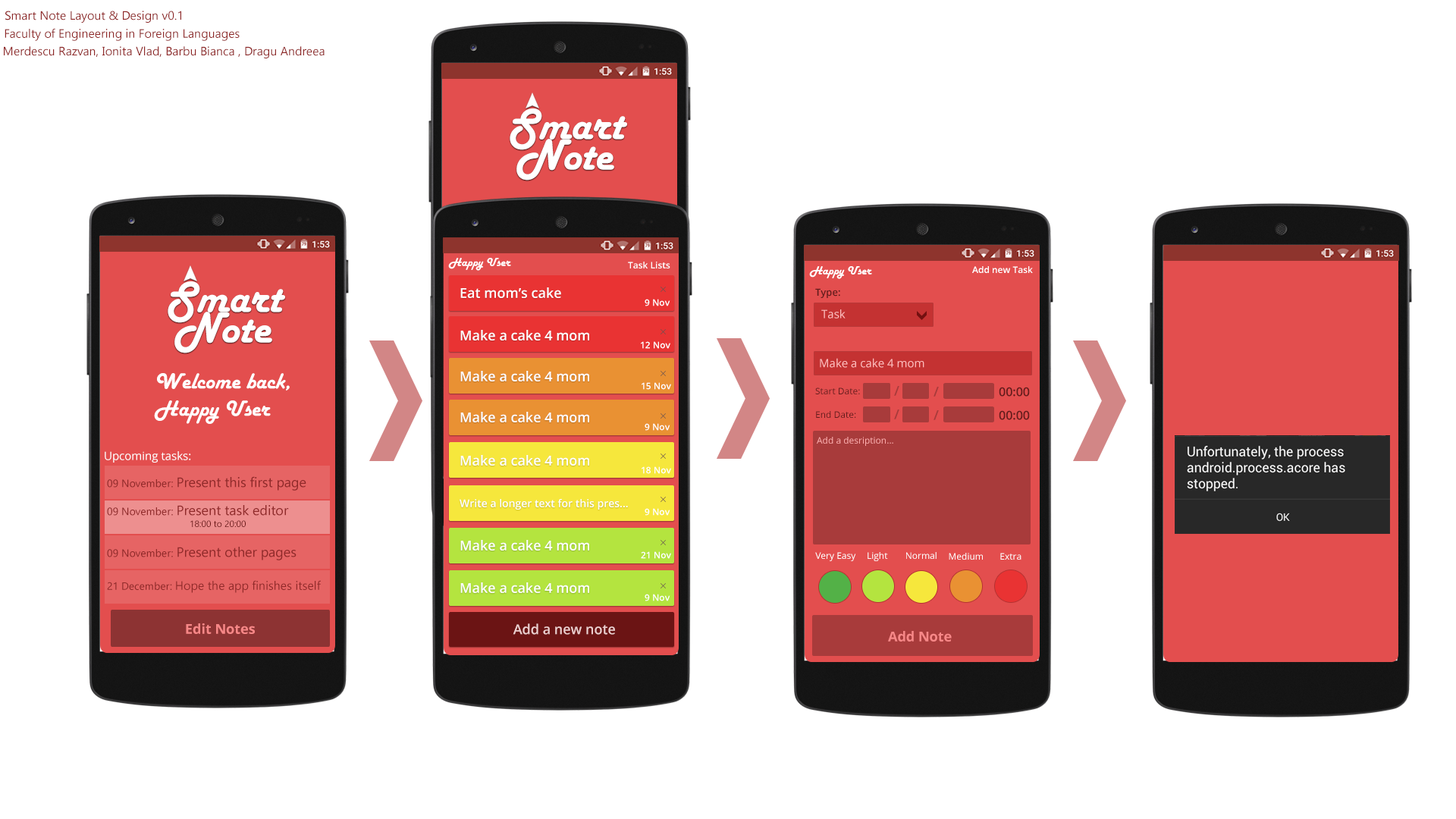
<style>
.page{position:relative;width:1456px;height:819px;background:#ffffff}
.page>*{position:absolute;margin:0}
.t1{font:12.1px "KhmerUI";color:#902929}
.t2{font:45.5px "HarlowSolid";color:#ffffff}
.t3{font:12.1px "HarlowSolid";color:#ffffff}
.t4{font:9.1px "OpenSans-Semibold";color:#ffffff}
.t5{font:13.6px "OpenSans-Semibold";color:#ffffff}
.t6{font:9.9px "OpenSans-Semibold";color:#631c1c}
.t7{font:11.4px "OpenSans";color:#ffbcbc}
.t8{font:11.4px "OpenSans";color:#ffbbbb}
.t9{font:22.7px "HarlowSolid";color:#ffffff}
.t10{font:9.1px "OpenSans";color:#631c1c}
.t11{font:13.6px "OpenSans-Semibold";color:#a83b3b}
.t12{font:12.1px "OpenSans-Semibold";color:#631c1c}
.t13{font:9.1px "OpenSans";color:#fdabab}
.t14{font:11.4px "OpenSans";color:#ffffff}
.t15{font:13.6px "KhmerUI";color:#902929}
.t16{font:10.6px "KhmerUI";color:#902929}
.t17{font:10.6px "OpenSans-Semibold";color:#ffffff}
.t18{font:9.1px "KhmerUI";color:#6d1616}
.t19{font:9.1px "OpenSans";color:#ffffff}
.t20{font:13.6px "OpenSans-Bold";color:#f78787}
.t21{font:13.6px "OpenSans-Semibold";color:#edcfcf}
</style>
<div class="page">
<p class="t1" style="left:5px;top:11px;width:176px;height:12px">Smart Note Layout &amp; Design v0.1</p>
<p class="t1" style="left:5px;top:28px;width:235px;height:13px">Faculty of Engineering in Foreign Languages</p>
<p class="t1" style="left:4px;top:46px;width:321px;height:12px">Merdescu Razvan, Ionita Vlad, Barbu Bianca , Dragu Andreea</p>
<p class="t2" style="left:510px;top:108px;width:117px;height:42px">Smart</p>
<p class="t2" style="left:516px;top:139px;width:98px;height:41px">Note</p>
<p class="t3" style="left:448px;top:258px;width:63px;height:13px">Happy User</p>
<p class="t4" style="left:628px;top:262px;width:42px;height:6px">Task Lists</p>
<p class="t3" style="left:809px;top:266px;width:63px;height:13px">Happy User</p>
<p class="t4" style="left:972px;top:266px;width:61px;height:7px">Add new Task</p>
<p class="t2" style="left:168px;top:281px;width:117px;height:42px">Smart</p>
<p class="t5" style="left:460px;top:287px;width:101px;height:11px">Eat mom’s cake</p>
<p class="t6" style="left:815px;top:288px;width:25px;height:10px">Type:</p>
<p class="t4" style="left:645px;top:299px;width:25px;height:7px">9 Nov</p>
<p class="t2" style="left:174px;top:312px;width:98px;height:41px">Note</p>
<p class="t7" style="left:821px;top:309px;width:25px;height:9px">Task</p>
<p class="t5" style="left:460px;top:330px;width:129px;height:10px">Make a cake 4 mom</p>
<p class="t4" style="left:641px;top:341px;width:29px;height:8px">12 Nov</p>
<p class="t8" style="left:820px;top:358px;width:104px;height:10px">Make a cake 4 mom</p>
<p class="t9" style="left:154px;top:373px;width:136px;height:51px">Welcome back, <br>Happy User</p>
<p class="t5" style="left:460px;top:371px;width:129px;height:10px">Make a cake 4 mom</p>
<p class="t4" style="left:642px;top:382px;width:29px;height:8px">15 Nov</p>
<p class="t10" style="left:815px;top:388px;width:45px;height:6px">Start Date:</p>
<p class="t11" style="left:894px;top:386px;width:5px;height:10px">/</p>
<p class="t11" style="left:933px;top:387px;width:6px;height:10px">/</p>
<p class="t12" style="left:999px;top:387px;width:31px;height:10px">00:00</p>
<p class="t5" style="left:460px;top:412px;width:129px;height:10px">Make a cake 4 mom</p>
<p class="t10" style="left:816px;top:411px;width:40px;height:7px">End Date:</p>
<p class="t11" style="left:894px;top:409px;width:5px;height:10px">/</p>
<p class="t11" style="left:933px;top:410px;width:6px;height:10px">/</p>
<p class="t12" style="left:999px;top:410px;width:31px;height:10px">00:00</p>
<p class="t4" style="left:645px;top:423px;width:25px;height:8px">9 Nov</p>
<p class="t13" style="left:817px;top:437px;width:76px;height:9px">Add a desription...</p>
<p class="t14" style="left:105px;top:451px;width:86px;height:12px">Upcoming tasks:</p>
<p class="t5" style="left:460px;top:455px;width:129px;height:11px">Make a cake 4 mom</p>
<p class="t4" style="left:642px;top:466px;width:29px;height:8px">18 Nov</p>
<p class="t15" style="left:107px;top:476px;width:199px;height:15px"><span class="t16">09 November: </span>Present this first page</p>
<p class="t15" style="left:107px;top:505px;width:182px;height:11px"><span class="t16">09 November: </span>Present task editor</p>
<p class="t17" style="left:460px;top:499px;width:168px;height:11px">Write a longer text for this pres...</p>
<p class="t4" style="left:645px;top:508px;width:25px;height:8px">9 Nov</p>
<p class="t18" style="left:190px;top:520px;width:56px;height:7px">18:00 to 20:00</p>
<p class="t5" style="left:460px;top:540px;width:129px;height:11px">Make a cake 4 mom</p>
<p class="t15" style="left:107px;top:547px;width:190px;height:13px"><span class="t16">09 November: </span>Present other pages</p>
<p class="t4" style="left:641px;top:551px;width:30px;height:8px">21 Nov</p>
<p class="t19" style="left:815px;top:552px;width:41px;height:9px">Very Easy</p>
<p class="t19" style="left:868px;top:552px;width:20px;height:9px">Light</p>
<p class="t19" style="left:906px;top:552px;width:31px;height:7px">Normal</p>
<p class="t19" style="left:949px;top:553px;width:34px;height:7px">Medium</p>
<p class="t19" style="left:1000px;top:553px;width:21px;height:7px">Extra</p>
<p class="t1" style="left:107px;top:580px;width:214px;height:13px"><span class="t16">21 December: </span>Hope the app finishes itself</p>
<p class="t5" style="left:460px;top:582px;width:129px;height:11px">Make a cake 4 mom</p>
<p class="t4" style="left:645px;top:594px;width:25px;height:7px">9 Nov</p>
<p class="t20" style="left:186px;top:623px;width:69px;height:11px">Edit Notes</p>
<p class="t21" style="left:513px;top:623px;width:102px;height:12px">Add a new note</p>
<p class="t20" style="left:888px;top:631px;width:64px;height:11px">Add Note</p>
</div>
